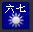
<style>
.page{position:relative;width:33px;height:32px;background:#000090}
.page>*{position:absolute;margin:0}
.t1{font:10.4px "SimSun";color:#ffffff}
</style>
<div class="page">
<p class="t1" style="left:5px;top:4px;width:21px;height:9px">六七</p>
</div>
